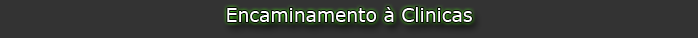
<style>
.page{position:relative;width:698px;height:38px;background:#333333}
.page>*{position:absolute;margin:0}
.t1{font:18.8px "Verdana";color:#ffffff}
</style>
<div class="page">
<p class="t1" style="left:227px;top:7px;width:245px;height:15px">Encaminamento à Clinicas</p>
</div>
